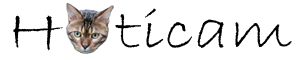
<style>
.page{position:relative;width:300px;height:60px;background:#ffffff}
.page>*{position:absolute;margin:0}
.t1{font:58px "BradleyHandITC";color:#000000;scale:1.26 1}
</style>
<div class="page">
<p class="t1" style="left:13px;top:8px;width:279px;height:43px">H   ticam</p>
</div>
